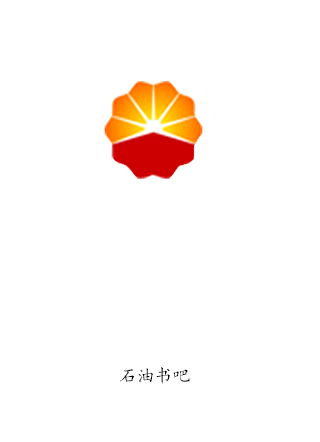
<style>
.page{position:relative;width:320px;height:442px;background:#ffffff}
.page>*{position:absolute;margin:0}
.t1{font:18px "¿¬Ìå";color:#000000}
</style>
<div class="page">
<p class="t1" style="left:119px;top:367px;width:71px;height:17px">石油书吧</p>
</div>
